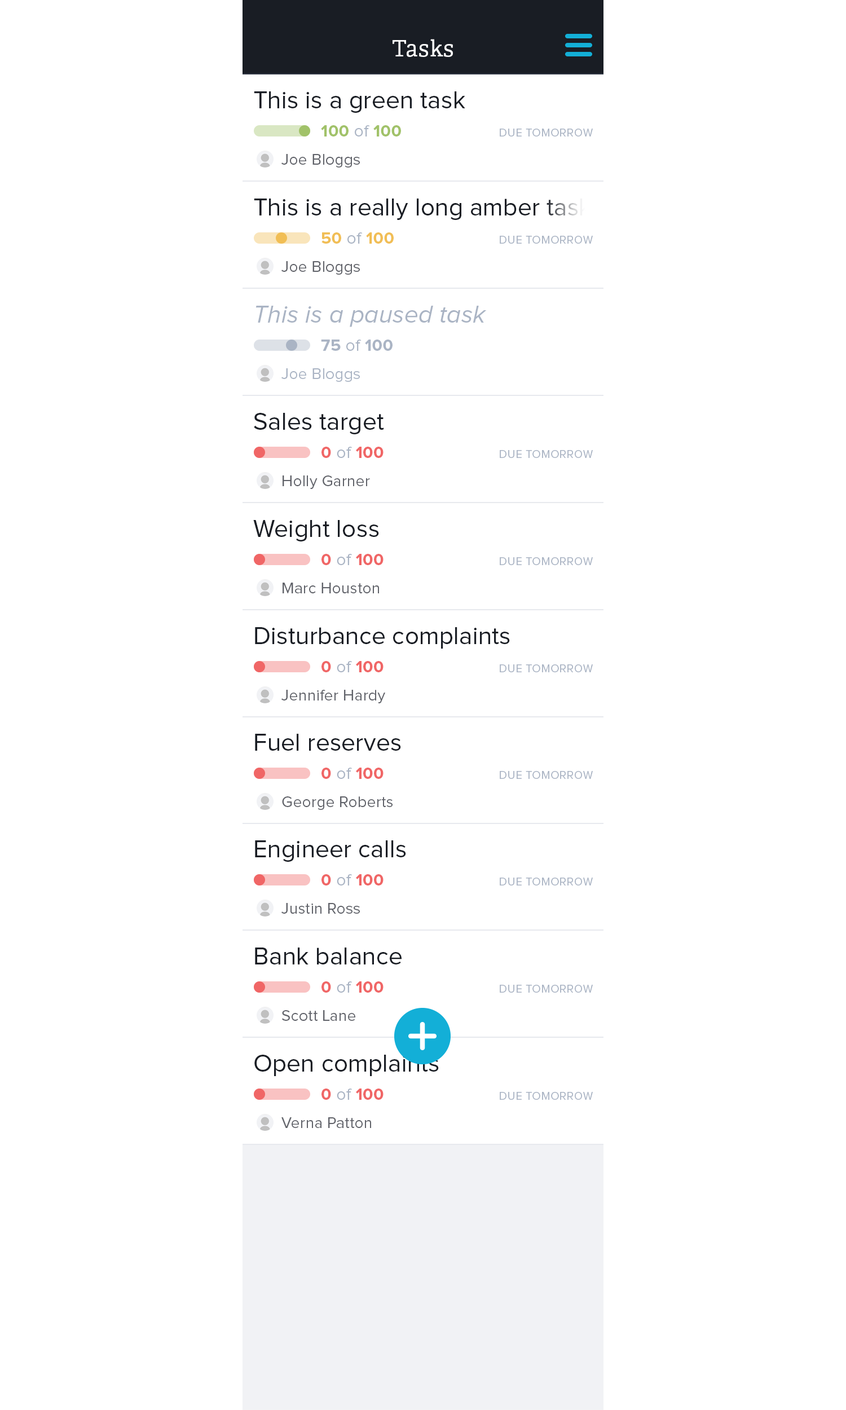
<style>
.page{position:relative;width:846px;height:1410px;background:#ffffff}
.page>*{position:absolute;margin:0}
.t1{font:22.7px "Adelle-Regular";letter-spacing:0.03em;color:#ffffff}
.t2{font:24.8px "ProximaNova-Regular";letter-spacing:0.005em;color:#191d24}
.t3{font:16.9px/16.9px "ProximaNova-Bold";letter-spacing:0.01em;color:#a1c269}
.t4{font:16.9px/16.9px "ProximaNova-Regular";letter-spacing:0.01em;color:#aab4c4}
.t5{font:15.8px/16.9px "ProximaNova-Regular";letter-spacing:0.01em;color:#606269}
.t6{font:11.3px "ProximaNova-Regular";letter-spacing:0.03em;color:#aab4c4}
.t7{font:16.9px/16.9px "ProximaNova-Bold";letter-spacing:0.01em;color:#f1be55}
.t8{font:24.8px "ProximaNova-RegularIt";letter-spacing:0.005em;color:#aab4c4}
.t9{font:16.9px/16.9px "ProximaNova-Bold";letter-spacing:0.01em;color:#aab4c4}
.t10{font:15.8px/16.9px "ProximaNova-Regular";letter-spacing:0.01em;color:#aab4c4}
.t11{font:16.9px/16.9px "ProximaNova-Bold";letter-spacing:0.01em;color:#f06666}
</style>
<div class="page">
<p class="t1" style="left:392px;top:39px;width:61px;height:18px">Tasks</p>
<p class="t2" style="left:254px;top:91px;width:211px;height:76px">This is a green task<br><span class="t3">100</span><span class="t4"> of </span><span class="t3">100<br></span><span class="t5">Joe Bloggs</span></p>
<p class="t6" style="left:500px;top:129px;width:93px;height:7px">DUE TOMORROW</p>
<p class="t2" style="left:254px;top:198px;width:337px;height:77px">This is a really long amber task<br><span class="t7">50</span><span class="t4"> of </span><span class="t7">100<br></span><span class="t5">Joe Bloggs</span></p>
<p class="t6" style="left:500px;top:236px;width:93px;height:8px">DUE TOMORROW</p>
<p class="t8" style="left:255px;top:306px;width:232px;height:76px">This is a paused task<br><span class="t9">75</span><span class="t4"> of </span><span class="t9">100<br></span><span class="t10">Joe Bloggs</span></p>
<p class="t2" style="left:254px;top:413px;width:130px;height:76px">Sales target<br><span class="t11">0</span><span class="t4"> of </span><span class="t11">100<br></span><span class="t5">Holly Garner</span></p>
<p class="t6" style="left:500px;top:450px;width:93px;height:8px">DUE TOMORROW</p>
<p class="t5" style="left:253px;top:520px;width:130px;height:73px"><span class="t2">Weight loss<br></span><span class="t11">0</span><span class="t4"> of </span><span class="t11">100<br></span>Marc Houston</p>
<p class="t6" style="left:500px;top:557px;width:93px;height:8px">DUE TOMORROW</p>
<p class="t2" style="left:255px;top:627px;width:255px;height:76px">Disturbance complaints<br><span class="t11">0</span><span class="t4"> of </span><span class="t11">100<br></span><span class="t5">Jennifer Hardy</span></p>
<p class="t6" style="left:500px;top:664px;width:93px;height:8px">DUE TOMORROW</p>
<p class="t5" style="left:255px;top:734px;width:146px;height:76px"><span class="t2">Fuel reserves<br></span><span class="t11">0</span><span class="t4"> of </span><span class="t11">100<br></span>George Roberts</p>
<p class="t6" style="left:500px;top:771px;width:93px;height:8px">DUE TOMORROW</p>
<p class="t2" style="left:255px;top:840px;width:151px;height:74px">Engineer calls<br><span class="t11">0</span><span class="t4"> of </span><span class="t11">100<br></span><span class="t5">Justin Ross</span></p>
<p class="t6" style="left:500px;top:877px;width:93px;height:8px">DUE TOMORROW</p>
<p class="t2" style="left:255px;top:947px;width:146px;height:74px">Bank balance<br><span class="t11">0</span><span class="t4"> of </span><span class="t11">100<br></span><span class="t5">Scott Lane</span></p>
<p class="t6" style="left:500px;top:985px;width:93px;height:7px">DUE TOMORROW</p>
<p class="t2" style="left:254px;top:1054px;width:185px;height:74px">Open complaints<br><span class="t11">0</span><span class="t4"> of </span><span class="t11">100<br></span><span class="t5">Verna Patton</span></p>
<p class="t6" style="left:500px;top:1092px;width:93px;height:8px">DUE TOMORROW</p>
</div>
